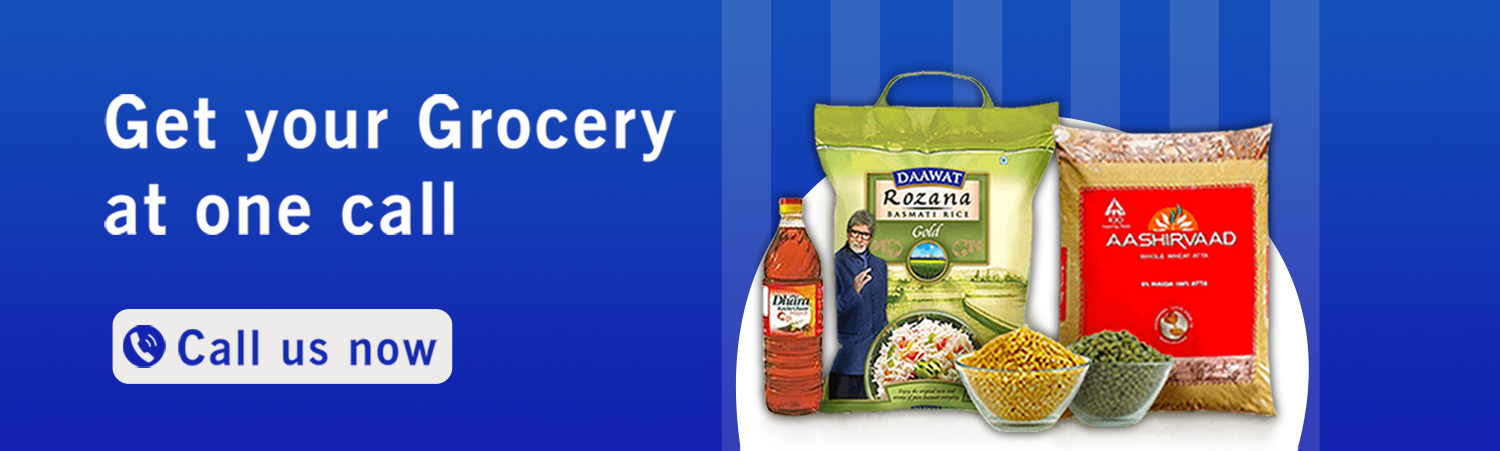
<style>
.page{position:relative;width:1500px;height:451px}
.page>*{position:absolute;margin:0}
.t1{font:71.5px "NewsGothicBT-Bold";letter-spacing:0.05em;color:#ffffff}
.t2{font:47.3px "NewsGothicBT-Bold";letter-spacing:0.05em;color:#1229b1}
</style>
<div class="page">
<p class="t1" style="left:104px;top:94px;width:572px;height:141px">Get your Grocery <br>at one call</p>
<p class="t2" style="left:178px;top:329px;width:260px;height:37px">Call us now</p>
</div>
